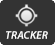
<style>
.page{position:relative;width:55px;height:45px;background:#333333}
.page>*{position:absolute;margin:0}
.t1{font:11px "MyriadPro-SemiboldIt";letter-spacing:0.01em;color:#ffffff}
</style>
<div class="page">
<p class="t1" style="left:6px;top:31px;width:42px;height:8px">TRACKER</p>
</div>
